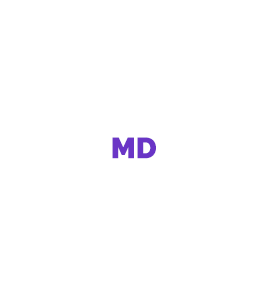
<style>
.page{position:relative;width:268px;height:301px;background:#ffffff}
.page>*{position:absolute;margin:0}
.t1{font:29.2px "Raleway-Black";color:#6a35c6}
</style>
<div class="page">
<p class="t1" style="left:112px;top:137px;width:44px;height:22px">MD</p>
</div>
